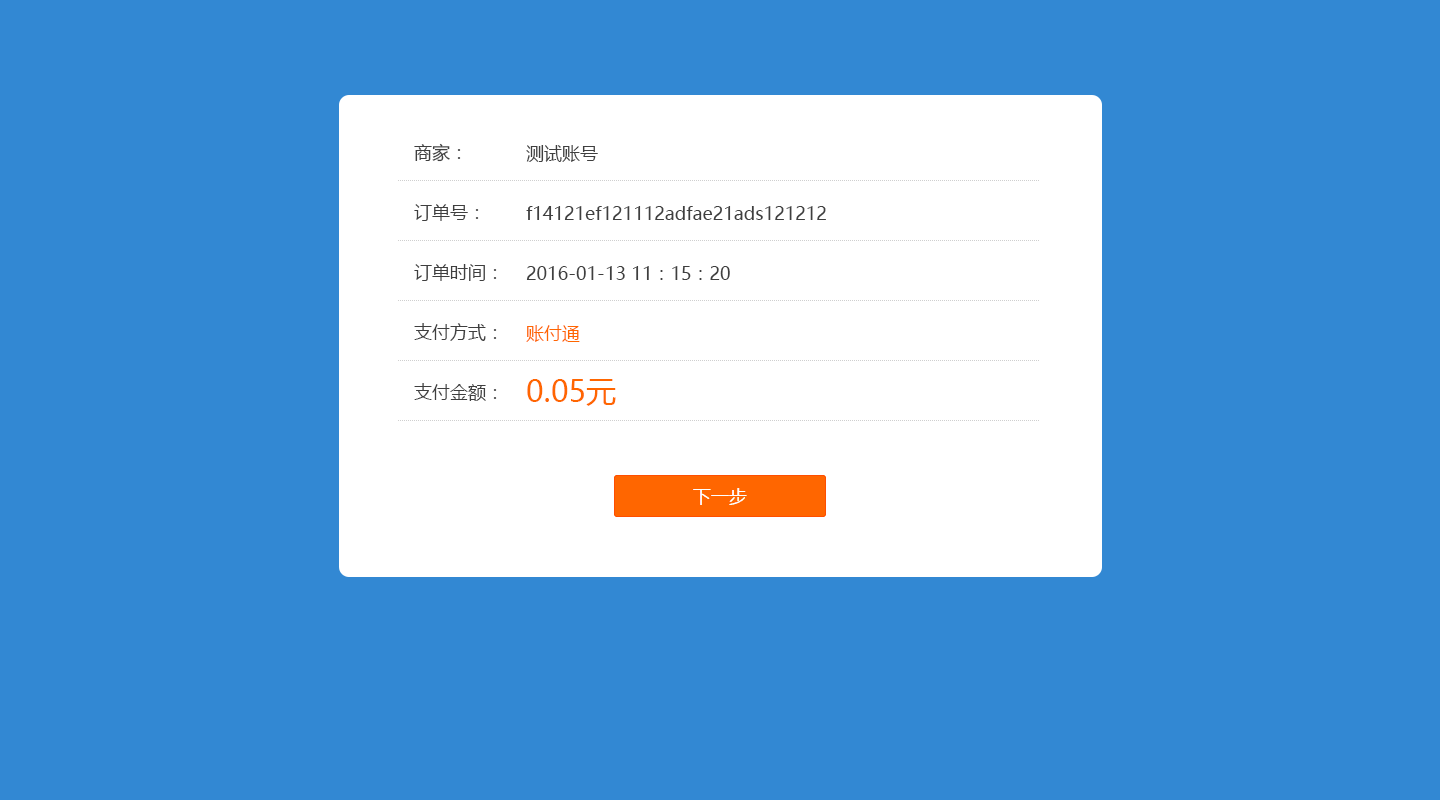
<style>
.page{position:relative;width:1440px;height:800px;background:#3288d3}
.page>*{position:absolute;margin:0}
.t1{font:18px/60px "MicrosoftYaHei";color:#3f3f3f}
.t2{font:18px/52px "MicrosoftYaHei";color:#ff6600}
.t3{font:30px/52px "MicrosoftYaHei";color:#ff6600}
</style>
<div class="page">
<p class="t1" style="left:414px;top:143px;width:83px;height:258px">商家：<br>订单号：<br>订单时间：<br>支付方式：<br>支付金额：</p>
<p class="t1" style="left:526px;top:145px;width:300px;height:261px">测试账号<br>f14121ef121112adfae21ads121212<br>2016-01-13 11：15：20<br><span class="t2">账付通<br></span><span class="t3">0.05元</span></p>
</div>
